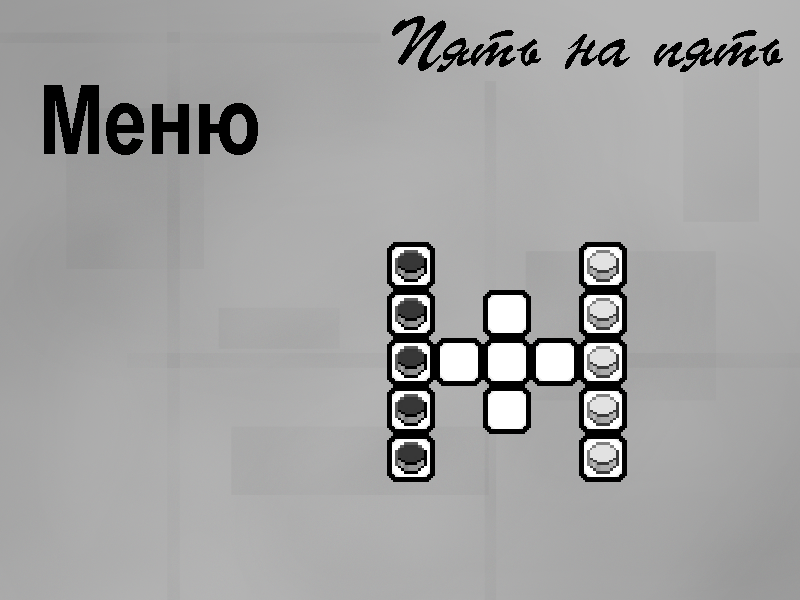
<style>
.page{position:relative;width:800px;height:600px}
.page>*{position:absolute;margin:0}
.t1{font:69.3px "ParsekCTT";color:#000000}
.t2{font:96px "ArialNarrow-Bold";color:#000000}
</style>
<div class="page">
<p class="t1" style="left:392px;top:16px;width:391px;height:56px">Пять на пять</p>
<p class="t2" style="left:44px;top:85px;width:214px;height:70px">Меню</p>
</div>
